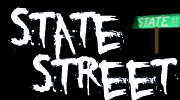
<style>
.page{position:relative;width:180px;height:100px;background:#010102}
.page>*{position:absolute;margin:0}
.t1{font:75px "YouMurdererBB";color:#ffffff}
</style>
<div class="page">
<p class="t1" style="left:8px;top:7px;width:116px;height:56px">State</p>
<p class="t1" style="left:30px;top:53px;width:150px;height:49px">Street</p>
</div>
